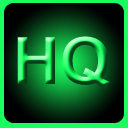
<style>
.page{position:relative;width:128px;height:128px}
.page>*{position:absolute;margin:0}
.t1{font:65px "Arial-BoldMT"}
</style>
<div class="page">
<p class="t1" style="left:17px;top:36px;width:93px;height:53px">HQ</p>
</div>
